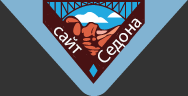
<style>
.page{position:relative;width:188px;height:96px;background:#333333}
.page>*{position:absolute;margin:0}
.t1{font:18px "MyriadPro-Regular";color:#ffffff}
</style>
<div class="page">
<p class="t1" style="left:54px;top:27px;width:28px;height:27px;rotate:47deg">сайт</p>
<p class="t1" style="left:98px;top:18px;width:44px;height:45px;rotate:-48deg">Седона</p>
</div>
